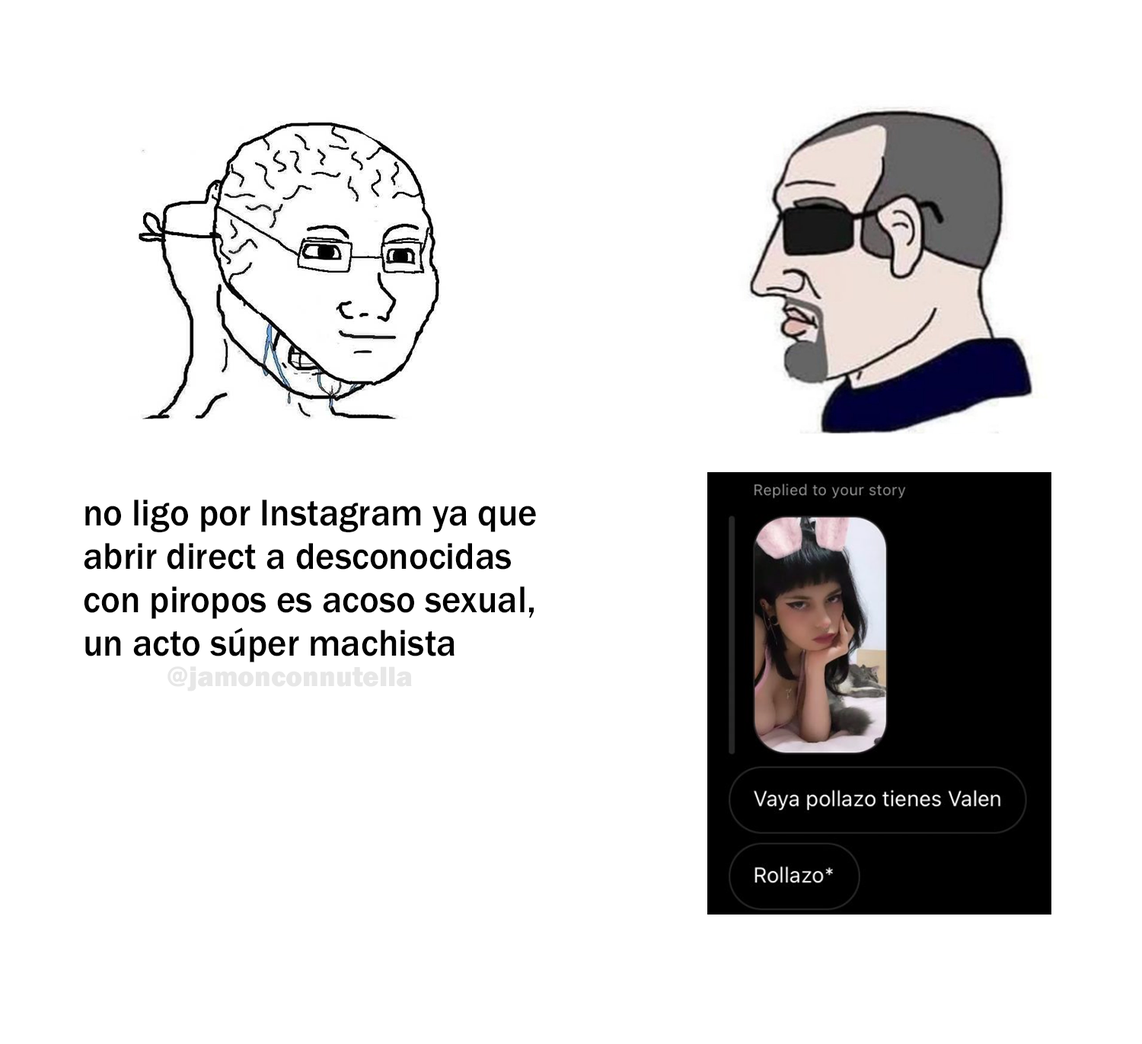
<style>
.page{position:relative;width:1142px;height:1044px;background:#ffffff}
.page>*{position:absolute;margin:0}
.t1{font:38.7px "FranklinGothic-Medium";color:#000000;scale:0.96 1}
.t2{font:28.8px "FranklinGothic-Heavy";color:#e7e7e7}
</style>
<div class="page">
<p class="t1" style="left:84px;top:500px;width:452px;height:162px">no ligo por Instagram ya que<br>abrir direct a desconocidas <br>con piropos es acoso sexual,<br>un acto súper machista</p>
<p class="t2" style="left:168px;top:666px;width:244px;height:25px">@jamonconnutella</p>
</div>
